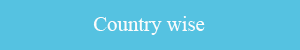
<style>
.page{position:relative;width:300px;height:50px;background:#55c2e1}
.page>*{position:absolute;margin:0}
.t1{font:20.8px "TimesNewRomanPSMT";color:#fbfbfb}
</style>
<div class="page">
<p class="t1" style="left:93px;top:16px;width:112px;height:19px">Country wise</p>
</div>
